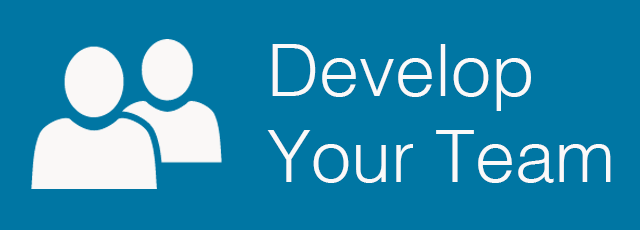
<style>
.page{position:relative;width:640px;height:230px;background:#0076a3}
.page>*{position:absolute;margin:0}
.t1{font:72px "Helvetica-Light";color:#faf9f9}
</style>
<div class="page">
<p class="t1" style="left:267px;top:44px;width:344px;height:139px">Develop <br>Your Team</p>
</div>
